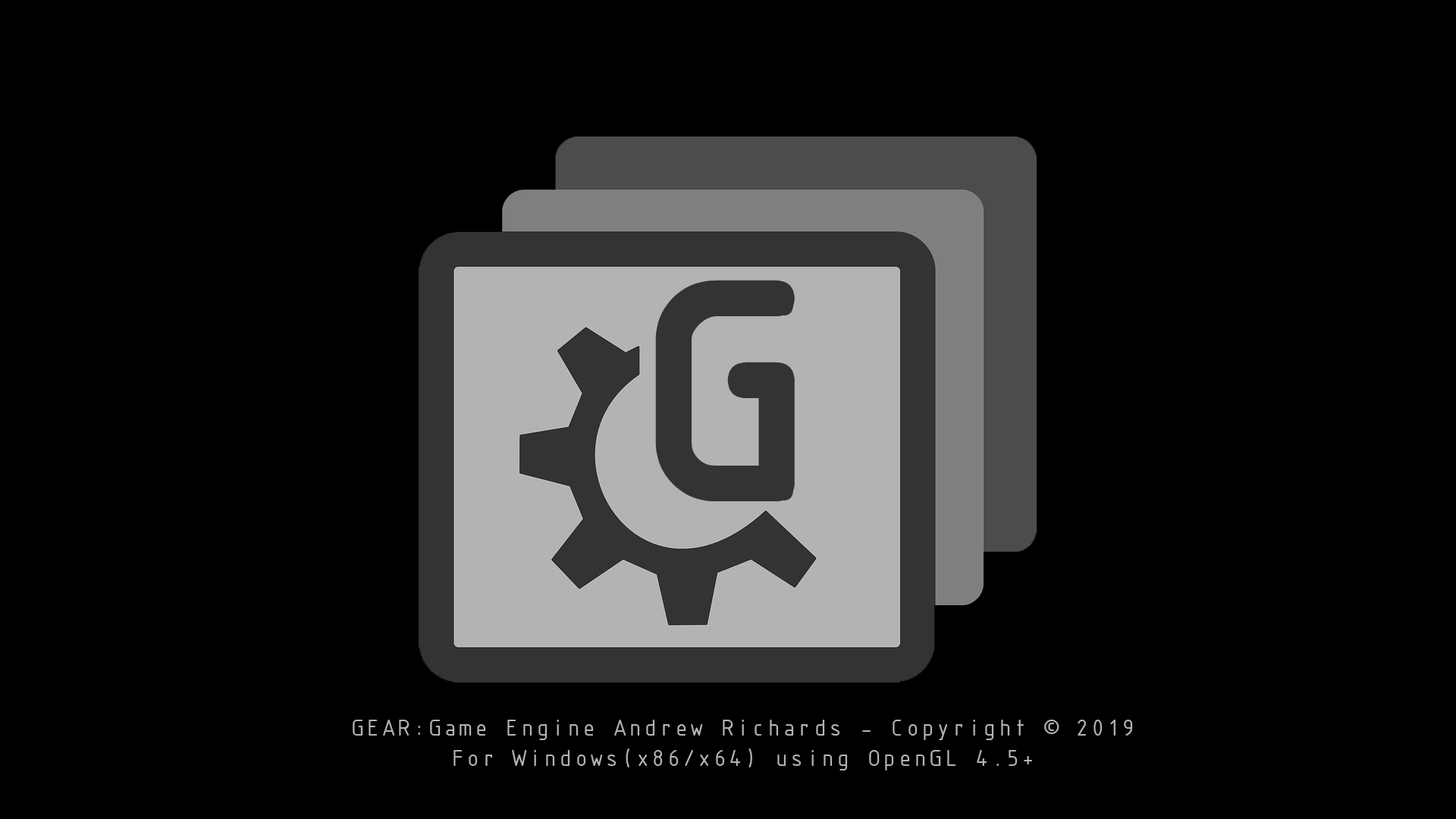
<style>
.page{position:relative;width:1456px;height:819px;background:#000000}
.page>*{position:absolute;margin:0}
.t1{font:25.3px "ISOCTEUR";letter-spacing:-0.1em;color:#b3b3b3}
</style>
<div class="page">
<p class="t1" style="left:353px;top:720px;width:780px;height:50px;text-align:center">GEAR:Game Engine Andrew Richards - Copyright © 2019<br>For Windows(x86/x64) using OpenGL 4.5+</p>
</div>
